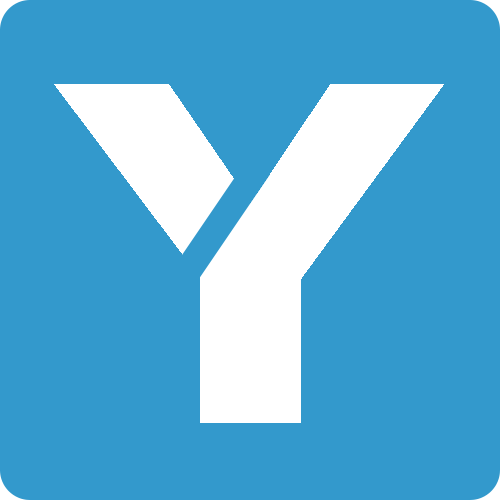
<style>
.page{position:relative;width:500px;height:500px;background:#3399cc}
.page>*{position:absolute;margin:0}
.t1{font:500px "zcool-gdh";color:#ffffff}
</style>
<div class="page">
<p class="t1" style="left:54px;top:84px;width:390px;height:288px">Y</p>
</div>
